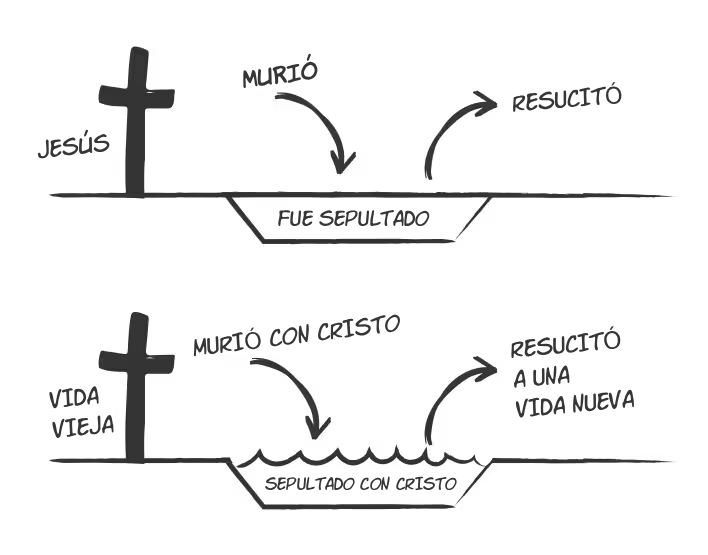
<style>
.page{position:relative;width:708px;height:555px;background:#ffffff}
.page>*{position:absolute;margin:0}
.t1{font:22px "KomikaHand";color:#363636}
.t2{font:30px "VTCLettererPro";color:#363636}
.t3{font:23px "DejaVuSans";color:#363636}
.t4{font:21px "KomikaHand";color:#363636}
.t5{font:27px "VTCLettererPro";color:#363636}
.t6{font:30px/30px "VTCLettererPro";color:#363636}
.t7{font:24px/30px "DejaVuSans";color:#363636}
.t8{font:22px "VTCLettererPro";color:#363636}
</style>
<div class="page">
<p class="t1" style="left:243px;top:53px;width:75px;height:36px;rotate:-7deg">MURIÓ</p>
<p class="t2" style="left:513px;top:82px;width:109px;height:30px;rotate:-5deg">RESUCIT<span class="t3">Ó</span>Ó</p>
<p class="t2" style="left:37px;top:129px;width:73px;height:30px;rotate:-6deg">JES<span class="t4">Ú</span>S</p>
<p class="t5" style="left:278px;top:210px;width:152px;height:16px">FUE SEPULTADO</p>
<p class="t2" style="left:193px;top:314px;width:208px;height:43px;rotate:-7deg">MURI<span class="t3">Ó</span> CON CRISTO</p>
<p class="t6" style="left:511px;top:326px;width:123px;height:92px;rotate:-5deg">RESUCIT<span class="t7">Ó</span>Ó <br>A UNA<br>VIDA NUEVA</p>
<p class="t6" style="left:49px;top:386px;width:65px;height:53px;rotate:-6deg">VIDA<br>VIEJA</p>
<p class="t8" style="left:265px;top:476px;width:192px;height:14px">SEPULTADO CON CRISTO</p>
</div>
